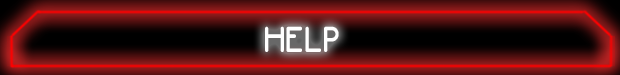
<style>
.page{position:relative;width:620px;height:75px}
.page>*{position:absolute;margin:0}
.t1{font:36px "Neon80s";color:#ffffff;scale:0.89 1}
</style>
<div class="page">
<p class="t1" style="left:265px;top:26px;width:74px;height:26px">HELP</p>
</div>
